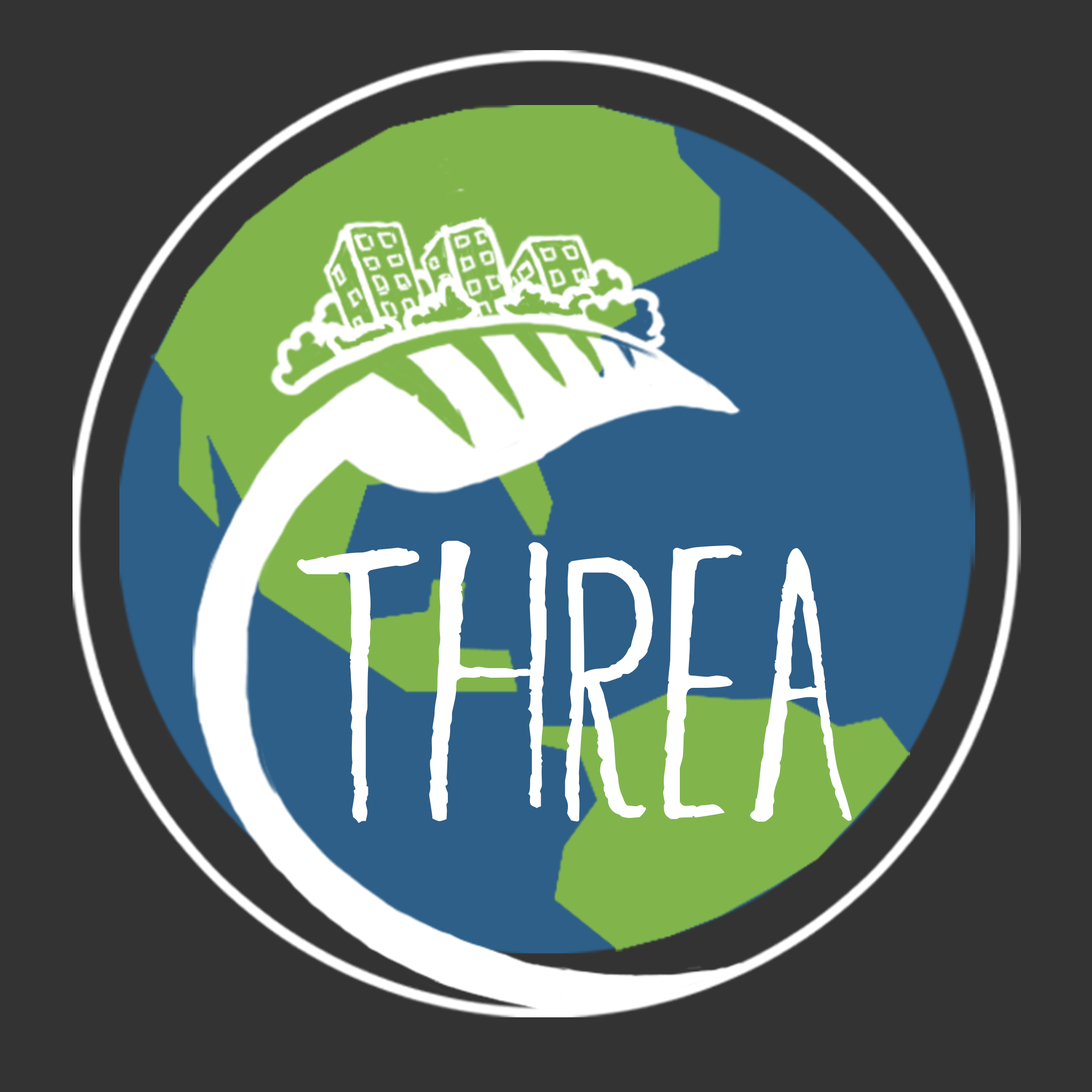
<style>
.page{position:relative;width:1092px;height:1092px;background:#333333}
.page>*{position:absolute;margin:0}
.t1{font:332.2px "BambooBrisk-Regular";color:#ffffff}
</style>
<div class="page">
<p class="t1" style="left:296px;top:541px;width:556px;height:282px">Threa</p>
</div>
